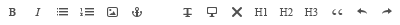
<style>
.page{position:relative;width:400px;height:25px;background:#ffffff}
.page>*{position:absolute;margin:0}
.t1{font:11px "TimesNewRomanPS-BoldMT";color:#4f4f4f}
.t2{font:11px "TimesNewRomanPS-ItalicMT";color:#4f4f4f}
.t3{font:13px "TimesNewRomanPS-BoldMT";color:#4f4f4f}
.t4{font:11px "TimesNewRomanPSMT";color:#4f4f4f}
.t5{font:26px "TimesNewRomanPSMT";color:#4f4f4f}
</style>
<div class="page">
<p class="t1" style="left:8px;top:8px;width:8px;height:8px">B</p>
<p class="t2" style="left:35px;top:8px;width:6px;height:8px">I</p>
<p class="t3" style="left:183px;top:8px;width:9px;height:9px">T</p>
<p class="t4" style="left:254px;top:8px;width:13px;height:8px">H1</p>
<p class="t4" style="left:279px;top:8px;width:14px;height:8px">H2</p>
<p class="t4" style="left:304px;top:8px;width:14px;height:8px">H3</p>
<p class="t5" style="left:332px;top:9px;width:11px;height:6px">“</p>
</div>
